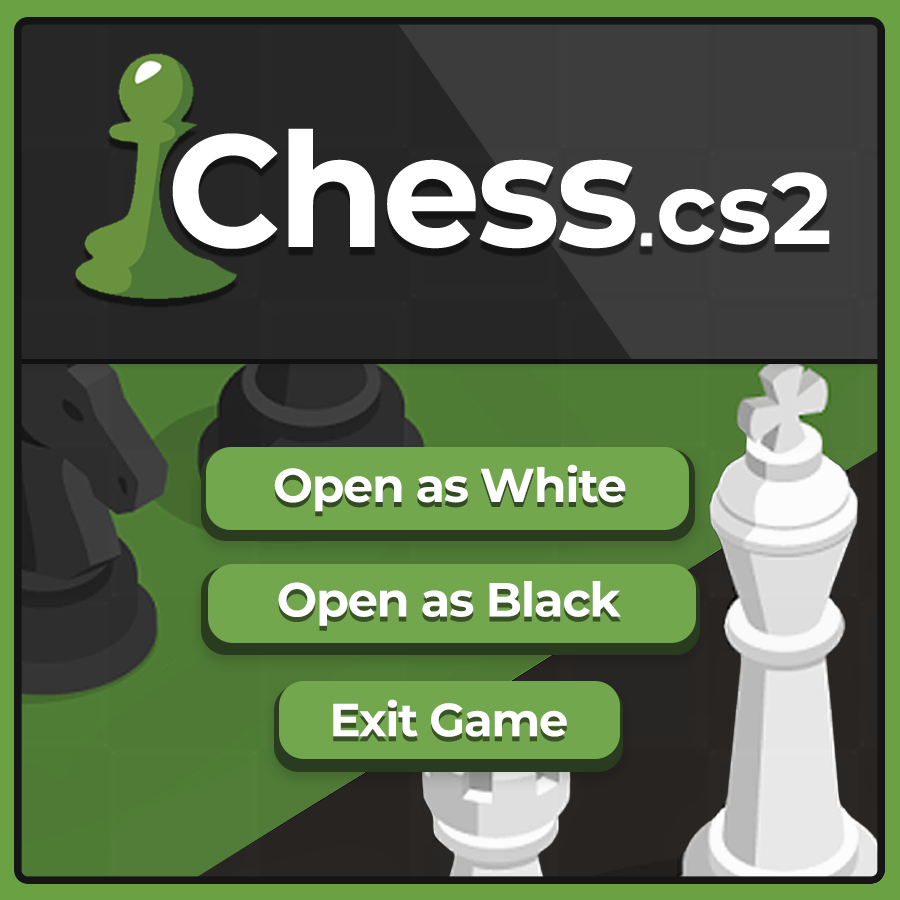
<style>
.page{position:relative;width:900px;height:900px}
.page>*{position:absolute;margin:0}
.t1{font:159.1px "MontserratRoman-Bold";letter-spacing:-0.025em;color:#ffffff}
.t2{font:100.4px "MontserratRoman-Bold";letter-spacing:0.01em;color:#ffffff}
.t3{font:47.3px "MontserratRoman-Bold";letter-spacing:-0.025em;color:#ffffff}
.t4{font:47.8px "MontserratRoman-Bold";letter-spacing:-0.025em;color:#ffffff}
.t5{font:46.5px "MontserratRoman-Bold";letter-spacing:-0.025em;color:#ffffff}
</style>
<div class="page">
<p class="t1" style="left:172px;top:128px;width:464px;height:121px">Chess</p>
<p class="t2" style="left:659px;top:172px;width:171px;height:73px">cs2</p>
<p class="t3" style="left:274px;top:464px;width:352px;height:48px">Open as White</p>
<p class="t4" style="left:278px;top:581px;width:343px;height:45px">Open as Black</p>
<p class="t5" style="left:333px;top:699px;width:234px;height:38px">Exit Game</p>
</div>
